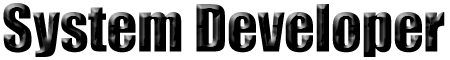
<style>
.page{position:relative;width:450px;height:60px;background:#ffffff}
.page>*{position:absolute;margin:0}
.t1{font:60px "Impact";color:#000000}
</style>
<div class="page">
<p class="t1" style="left:3px;top:3px;width:442px;height:54px">System Developer</p>
</div>
